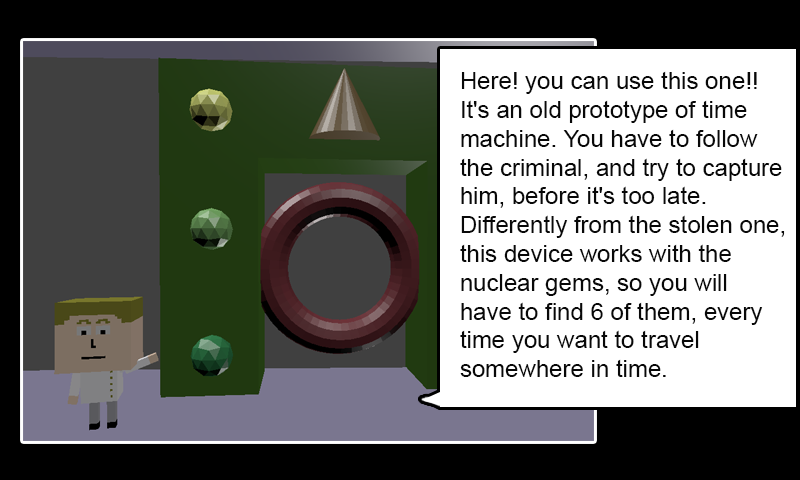
<style>
.page{position:relative;width:800px;height:480px;background:#ffffff}
.page>*{position:absolute;margin:0}
.t1{font:24px "ArialMT";color:#080808}
</style>
<div class="page">
<p class="t1" style="left:460px;top:71px;width:325px;height:306px">Here! you can use this one!!<br>It's an old prototype of time<br>machine. You have to follow <br>the criminal, and try to capture <br>him, before it's too late.<br>Differently from the stolen one, <br>this device works with the <br>nuclear gems, so you will <br>have to find 6 of them, every <br>time you want to travel <br>somewhere in time.</p>
</div>
